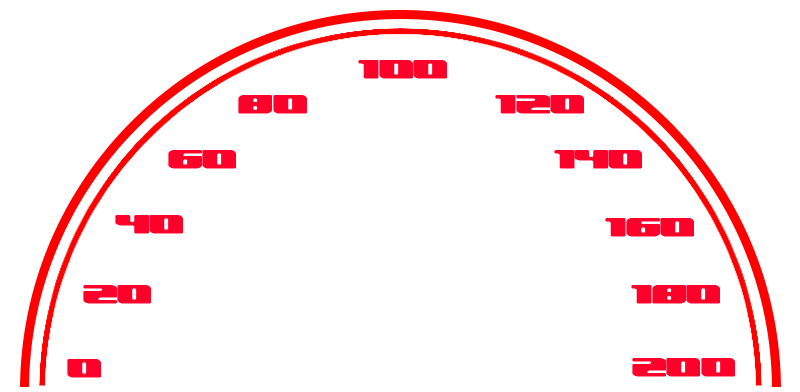
<style>
.page{position:relative;width:800px;height:392px;background:#ffffff}
.page>*{position:absolute;margin:0}
.t1{font:21px "UnderwhelmedBRK";color:#ff002a;font-weight:bold;scale:1.79 1}
</style>
<div class="page">
<p class="t1" style="left:358px;top:60px;width:89px;height:19px">100</p>
<p class="t1" style="left:238px;top:95px;width:69px;height:19px">80</p>
<p class="t1" style="left:495px;top:95px;width:89px;height:19px">120</p>
<p class="t1" style="left:168px;top:150px;width:68px;height:19px">60</p>
<p class="t1" style="left:554px;top:150px;width:88px;height:19px">140</p>
<p class="t1" style="left:115px;top:215px;width:68px;height:19px">40</p>
<p class="t1" style="left:605px;top:218px;width:89px;height:19px">160</p>
<p class="t1" style="left:83px;top:285px;width:68px;height:19px">20</p>
<p class="t1" style="left:631px;top:285px;width:89px;height:19px">180</p>
<p class="t1" style="left:67px;top:359px;width:34px;height:19px">0</p>
<p class="t1" style="left:632px;top:358px;width:103px;height:19px">200</p>
</div>
